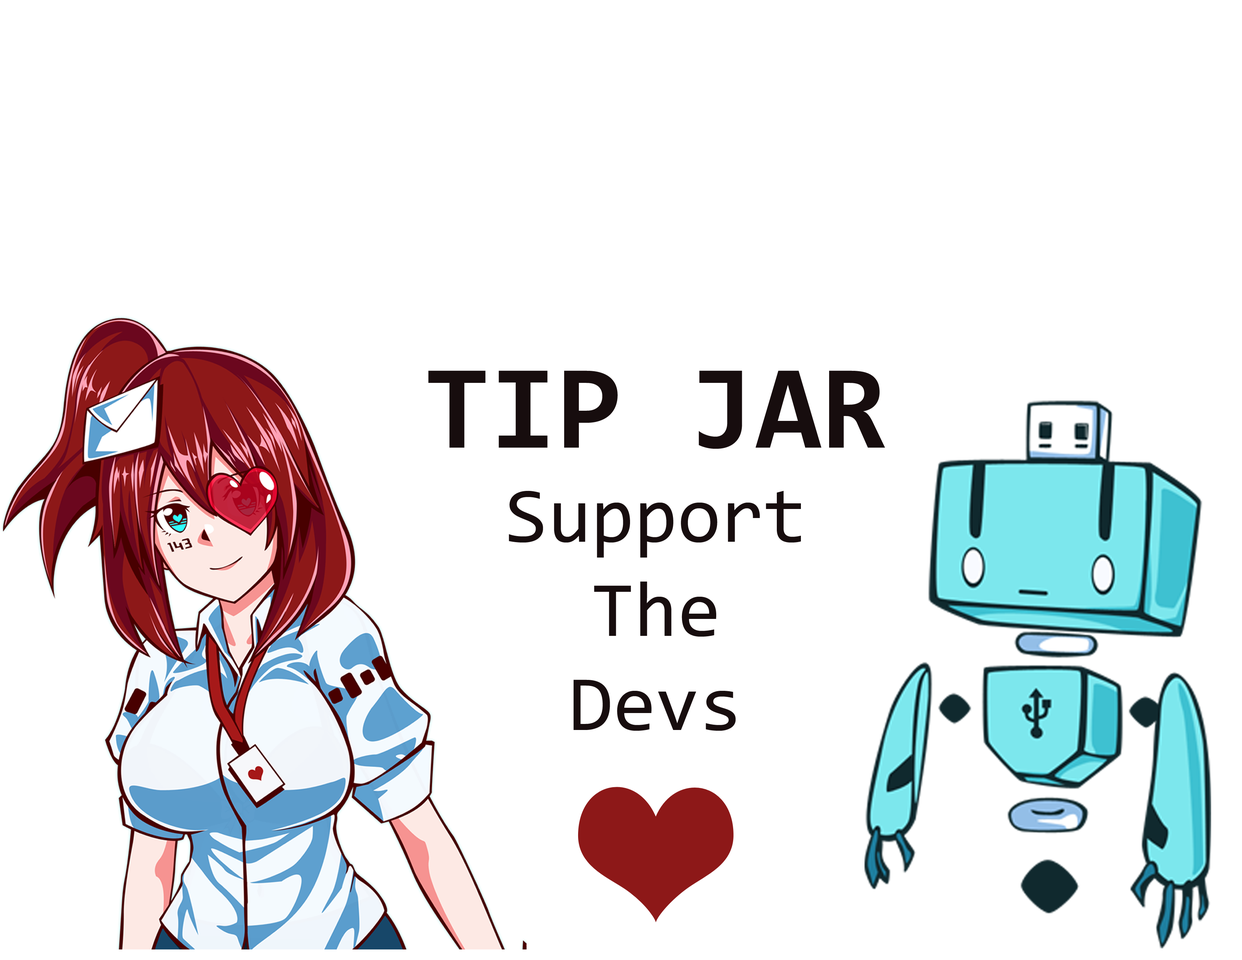
<style>
.page{position:relative;width:1242px;height:960px;background:#ffffff}
.page>*{position:absolute;margin:0}
.t1{font:78.5px "Consolas";color:#170d0e}
.t2{font:120.6px "Consolas-Bold";color:#170d0e}
</style>
<div class="page">
<p class="t1" style="left:428px;top:370px;width:457px;height:361px;text-align:center"><span class="t2">TIP JAR<br></span>Support<br>The<br>Devs</p>
</div>
